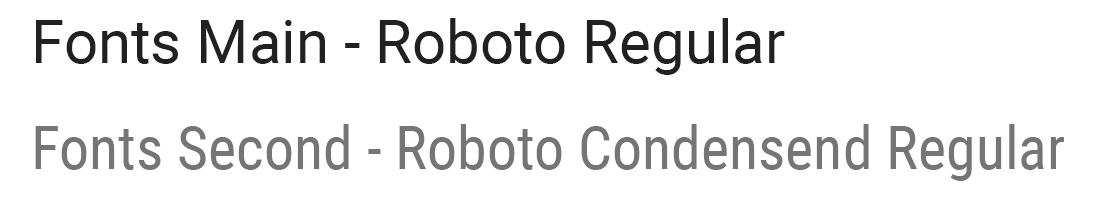
<style>
.page{position:relative;width:1100px;height:200px;background:#ffffff}
.page>*{position:absolute;margin:0}
.t1{font:60px "Roboto-Regular";color:#212121}
.t2{font:60px "RobotoCondensed-Regular";color:#757575}
</style>
<div class="page">
<p class="t1" style="left:36px;top:18px;width:749px;height:57px">Fonts Main - Roboto Regular</p>
<p class="t2" style="left:35px;top:124px;width:1029px;height:57px">Fonts Second - Roboto Condensend Regular</p>
</div>
